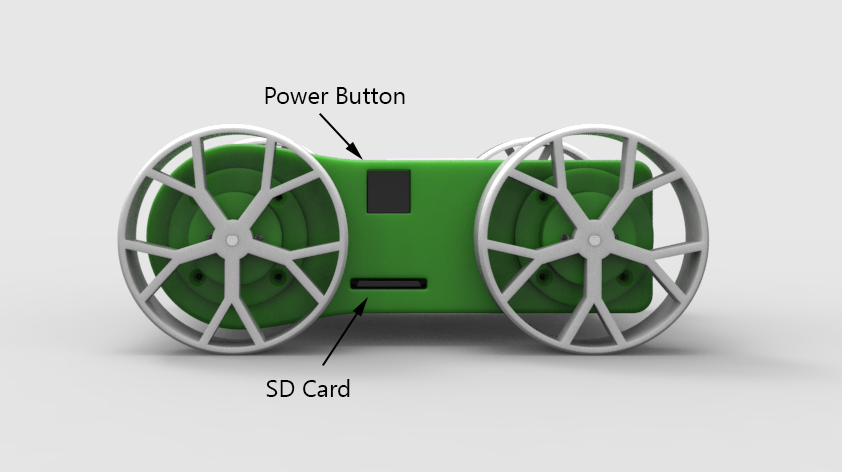
<style>
.page{position:relative;width:842px;height:472px;background:#e7e7e7}
.page>*{position:absolute;margin:0}
.t1{font:24px "Leelawadee";color:#000000}
</style>
<div class="page">
<p class="t1" style="left:265px;top:87px;width:140px;height:17px">Power Button</p>
<p class="t1" style="left:266px;top:379px;width:84px;height:18px">SD Card</p>
</div>
